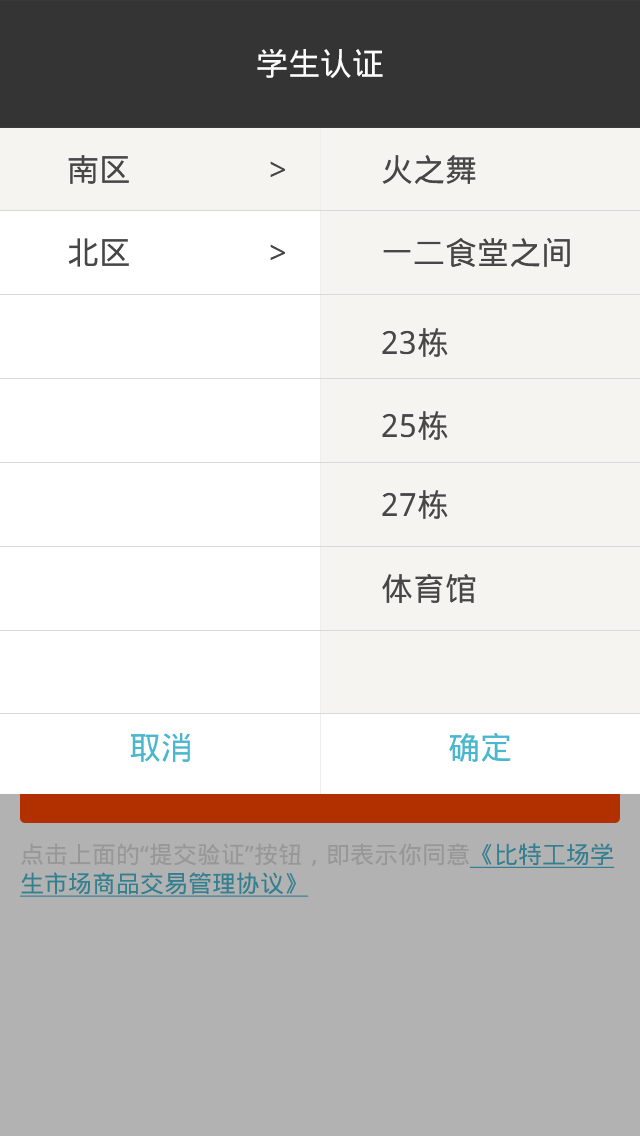
<style>
.page{position:relative;width:640px;height:1136px;background:#ffffff}
.page>*{position:absolute;margin:0}
.t1{font:32px "DroidSansFallback";color:#ffffff}
.t2{font:32px "DroidSansFallback";color:#474747}
.t3{font:32px "DroidSansFallback";color:#48b8ce}
.t4{font:24px "DroidSansFallback"}
.t5{font:24px "DroidSansFallback";text-decoration:underline}
</style>
<div class="page">
<p class="t1" style="left:257px;top:49px;width:126px;height:29px">学生认证</p>
<p class="t2" style="left:68px;top:155px;width:61px;height:29px">南区</p>
<p class="t2" style="left:270px;top:161px;width:15px;height:17px">&gt;</p>
<p class="t2" style="left:382px;top:155px;width:94px;height:29px">火之舞</p>
<p class="t2" style="left:68px;top:238px;width:61px;height:29px">北区</p>
<p class="t2" style="left:270px;top:244px;width:15px;height:17px">&gt;</p>
<p class="t2" style="left:383px;top:237px;width:187px;height:30px">一二食堂之间</p>
<p class="t2" style="left:382px;top:328px;width:66px;height:29px">23栋</p>
<p class="t2" style="left:382px;top:411px;width:66px;height:29px">25栋</p>
<p class="t2" style="left:382px;top:490px;width:66px;height:29px">27栋</p>
<p class="t2" style="left:382px;top:574px;width:94px;height:29px">体育馆</p>
<p class="t3" style="left:130px;top:733px;width:60px;height:29px">取消</p>
<p class="t3" style="left:449px;top:733px;width:62px;height:29px">确定</p>
<p class="t4" style="left:20px;top:843px;width:595px;height:54px">点击上面的“提交验证”按钮，即表示你同意<span class="t5">《比特工场学<br>生市场商品交易管理协议》</span></p>
</div>
